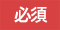
<style>
.page{position:relative;width:60px;height:30px;background:#d84141}
.page>*{position:absolute;margin:0}
.t1{font:18px "MS-Gothic";letter-spacing:-0.1em;color:#ffffff}
</style>
<div class="page">
<p class="t1" style="left:14px;top:6px;width:34px;height:17px">必須</p>
</div>
